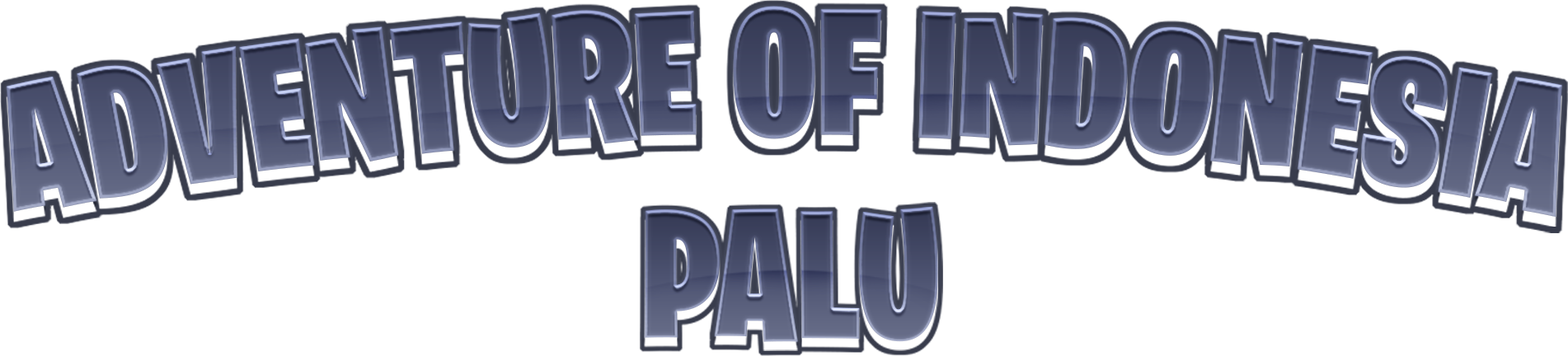
<style>
.page{position:relative;width:1568px;height:356px;background:#ffffff}
.page>*{position:absolute;margin:0}
.t1{font:181.4px "BurbankBigCondensed-Black";color:#4c5270;scale:0.96 1}
.t2{font:184.9px "BurbankBigCondensed-Black";color:#4c5270;scale:0.96 1}
</style>
<div class="page">
<p class="t1" style="left:7px;top:6px;width:1555px;height:212px">ADVENTURE OF INDONESIA</p>
<p class="t2" style="left:645px;top:206px;width:293px;height:136px">PALU</p>
</div>
